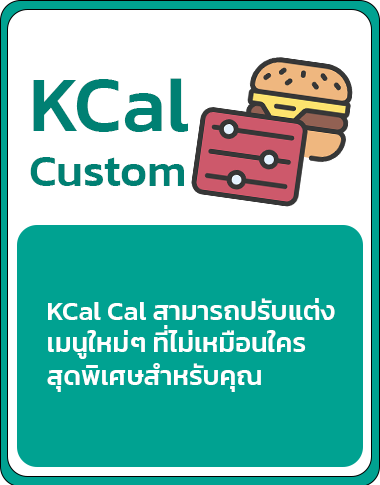
<style>
.page{position:relative;width:380px;height:485px;background:#00a291}
.page>*{position:absolute;margin:0}
.t1{font:45.8px "Kanit-Medium";color:#008073}
.t2{font:79.2px "Kanit-Medium";color:#008073}
.t3{font:27px "Kanit-Medium";color:#ffffff}
</style>
<div class="page">
<p class="t1" style="left:30px;top:78px;width:158px;height:108px"><span class="t2">KCal<br></span>Custom</p>
<p class="t3" style="left:47px;top:298px;width:288px;height:94px">KCal Cal สามารถปรับแต่ง<br>เมนูใหม่ๆ ที่ไม่เหมือนใคร<br>สุดพิเศษสำหรับคุณ</p>
</div>
